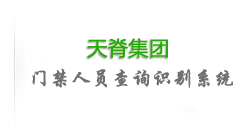
<style>
.page{position:relative;width:249px;height:138px;background:#ffffff}
.page>*{position:absolute;margin:0}
.t1{font:20px "MicrosoftYaHei";color:#25a90b;font-weight:bold}
.t2{font:20px "STXingkai";color:#707070;font-weight:bold}
</style>
<div class="page">
<p class="t1" style="left:87px;top:38px;width:81px;height:20px">天脊集团</p>
<p class="t2" style="left:32px;top:68px;width:201px;height:20px">门禁人员查询识别系统</p>
</div>
